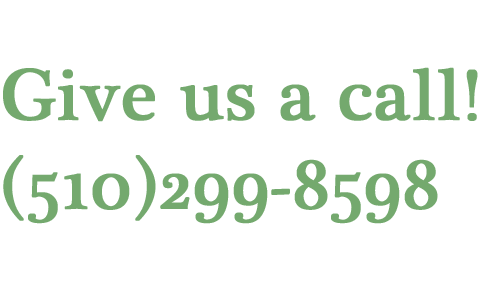
<style>
.page{position:relative;width:500px;height:300px;background:#ffffff}
.page>*{position:absolute;margin:0}
.t1{font:73.8px "PlantagenetCherokee";color:#74a96e;font-weight:bold}
</style>
<div class="page">
<p class="t1" style="left:3px;top:67px;width:475px;height:157px">Give us a call!<br>(510)299-8598</p>
</div>
